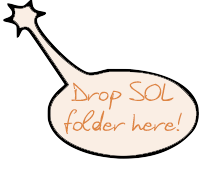
<style>
.page{position:relative;width:208px;height:181px;background:#ffffff}
.page>*{position:absolute;margin:0}
.t1{font:23.8px "DaghiHandwriting";color:#de8643;scale:1.05 1}
</style>
<div class="page">
<p class="t1" style="left:64px;top:81px;width:118px;height:53px;text-align:center">Drop SOL<br>folder here!</p>
</div>
